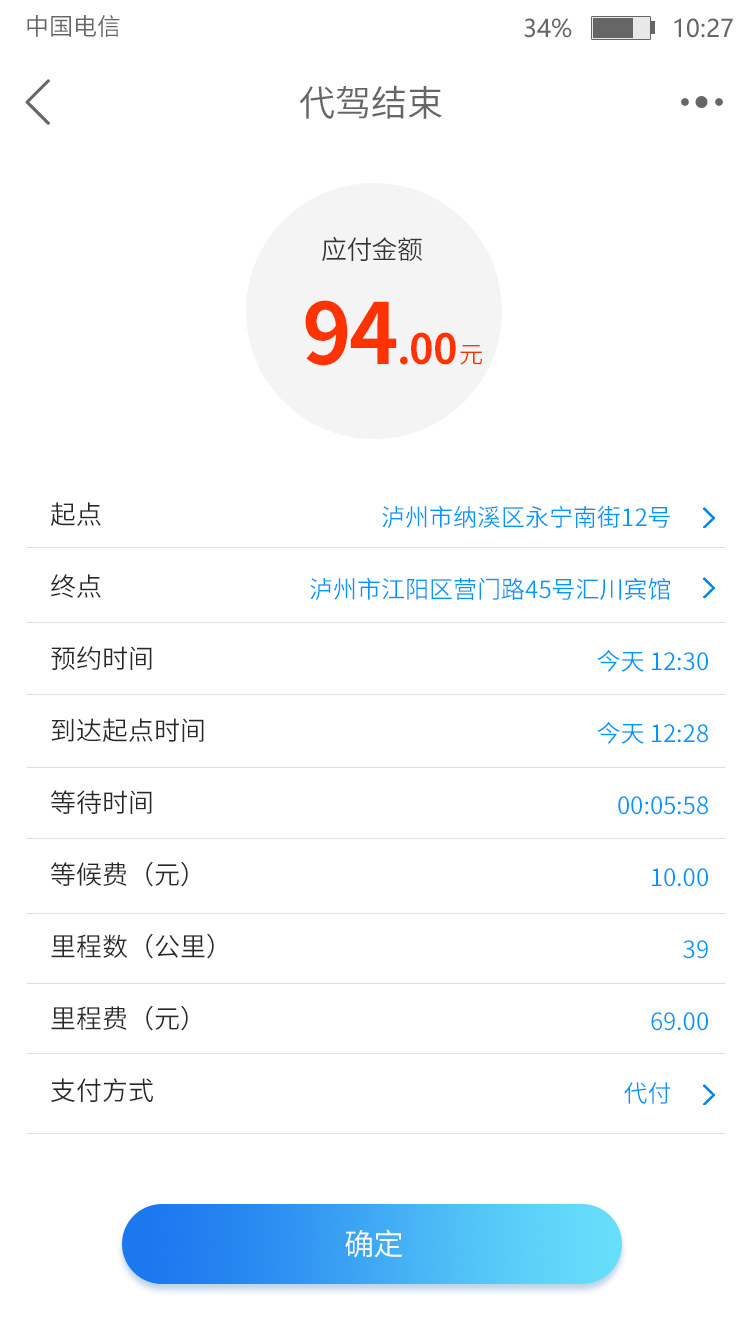
<style>
.page{position:relative;width:750px;height:1336px;background:#ffffff}
.page>*{position:absolute;margin:0}
.t1{font:24px "SourceHanSansCN-Normal";color:#666666}
.t2{font:24px "MicrosoftYaHei";color:#666666}
.t3{font:36px "SourceHanSansCN-Normal";color:#666666}
.t4{font:26px "SourceHanSansCN-Normal";letter-spacing:-0.025em;color:#333333}
.t5{font:42px "SourceHanSansCN-Bold";letter-spacing:-0.025em;color:#ff3300}
.t6{font:84.1px "SourceHanSansCN-Bold";letter-spacing:-0.025em;color:#ff3300}
.t7{font:24px "SourceHanSansCN-Normal";letter-spacing:-0.025em;color:#ff3300}
.t8{font:26px/72px "SourceHanSansCN-Normal";color:#282828}
.t9{font:24px/72px "SourceHanSansCN-Normal";color:#0096ff}
.t10{font:30px "SourceHanSansCN-Normal";letter-spacing:-0.025em;color:#ffffff}
</style>
<div class="page">
<p class="t1" style="left:27px;top:15px;width:93px;height:22px">中国电信</p>
<p class="t2" style="left:524px;top:18px;width:209px;height:20px">34%              10:27</p>
<p class="t3" style="left:299px;top:85px;width:143px;height:34px">代驾结束</p>
<p class="t4" style="left:322px;top:237px;width:100px;height:25px">应付金额</p>
<p class="t5" style="left:305px;top:300px;width:151px;height:66px"><span class="t6">94</span>.00</p>
<p class="t7" style="left:460px;top:345px;width:22px;height:20px">元</p>
<p class="t8" style="left:50px;top:502px;width:164px;height:600px">起点<br>终点<br>预约时间<br>到达起点时间<br>等待时间<br>等候费（元）<br>里程数（公里）<br>里程费（元）<br>支付方式</p>
<p class="t9" style="left:310px;top:505px;width:398px;height:599px;text-align:right">泸州市纳溪区永宁南街12号       <br>泸州市江阳区营门路45号汇川宾馆       <br>今天 12:30<br>今天 12:28<br>00:05:58<br>10.00<br>39<br>69.00<br>代付</p>
<p class="t10" style="left:345px;top:1229px;width:58px;height:29px">确定</p>
</div>
